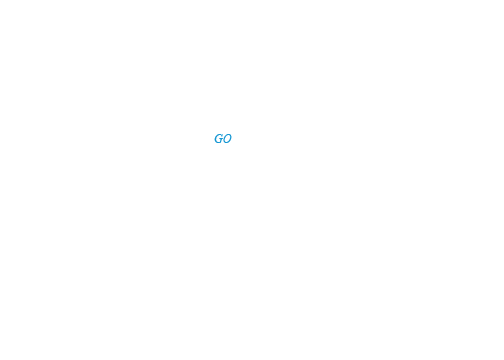
<style>
.page{position:relative;width:504px;height:360px;background:#ffffff}
.page>*{position:absolute;margin:0}
.t1{font:12px "TimesNewRomanPS-ItalicMT";color:#1597d3}
</style>
<div class="page">
<p class="t1" style="left:214px;top:134px;width:18px;height:9px">GO</p>
</div>
